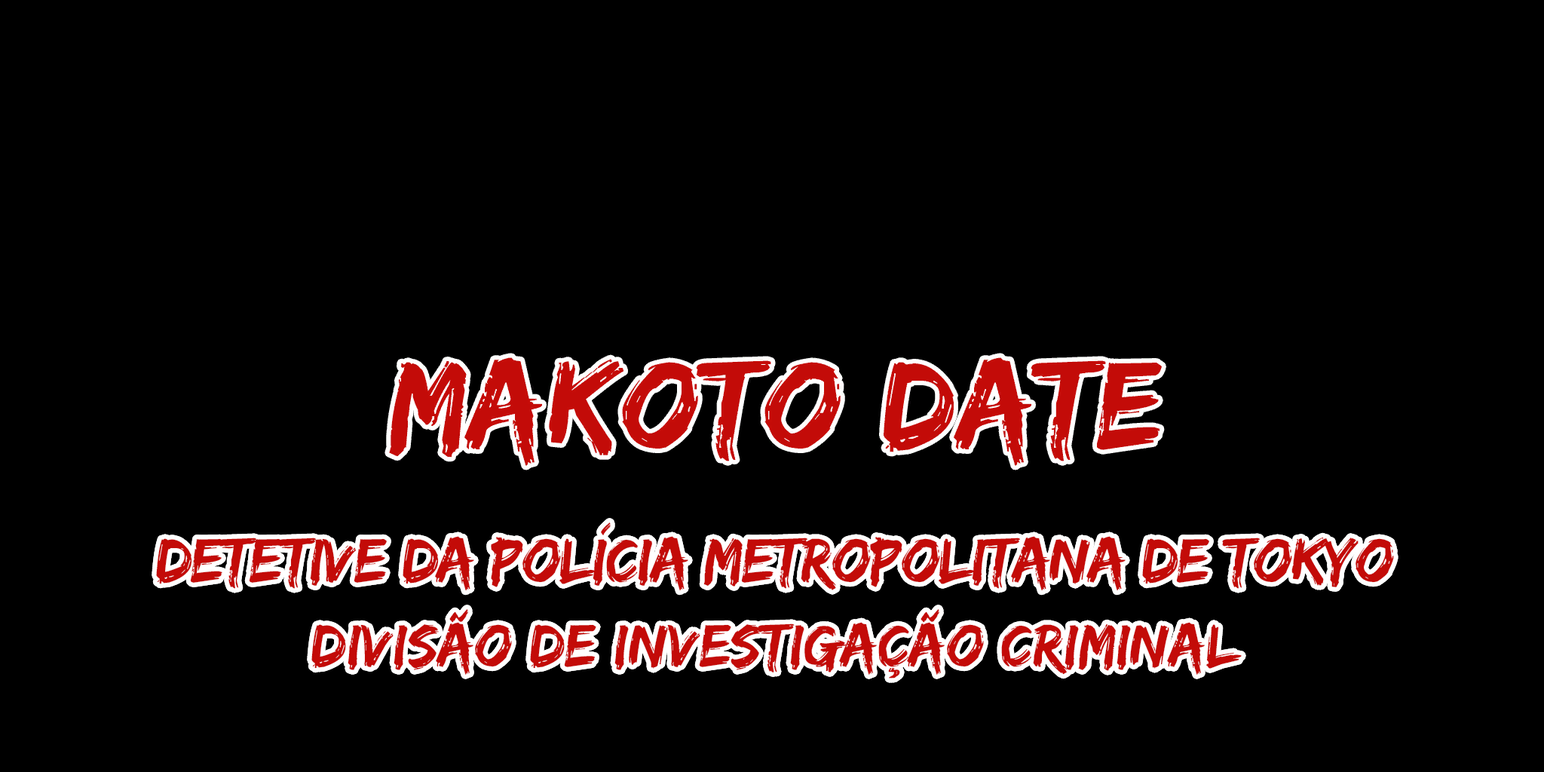
<style>
.page{position:relative;width:1544px;height:772px;background:#000000}
.page>*{position:absolute;margin:0}
.t1{font:64.8px/43px "EdoSZ";letter-spacing:-0.02em;color:#c30b08}
.t2{font:62.6px/84.5px "EdoSZ";color:#c30b08}
</style>
<div class="page">
<p class="t1" style="left:156px;top:523px;width:1238px;height:156px;text-align:center">Detetive da polícia metropolitana de Tokyo<br><span class="t2">Divisão de investigaÇão Criminal</span></p>
</div>
